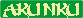
<style>
.page{position:relative;width:83px;height:18px;background:#029834}
.page>*{position:absolute;margin:0}
.t1{font:20.8px "SevenSwordsmenBB";color:#eeefa3}
</style>
<div class="page">
<p class="t1" style="left:3px;top:3px;width:76px;height:15px">akunku</p>
</div>
